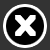
<style>
.page{position:relative;width:50px;height:50px;background:#333333}
.page>*{position:absolute;margin:0}
.t1{font:29.6px "BerlinSansFBDemi-Bold";color:#ffffff;scale:1.26 1}
</style>
<div class="page">
<p class="t1" style="left:15px;top:15px;width:21px;height:21px">X</p>
</div>
